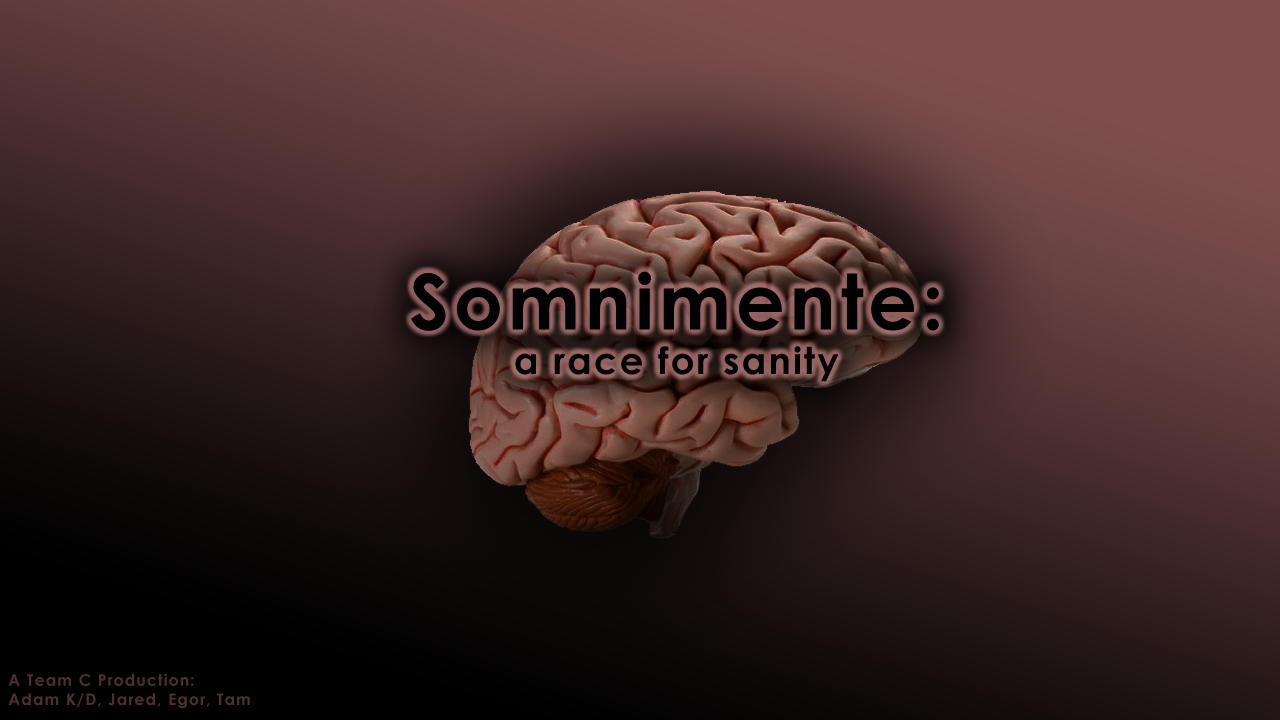
<style>
.page{position:relative;width:1280px;height:720px}
.page>*{position:absolute;margin:0}
.t1{font:37px "CenturyGothic-Bold";letter-spacing:0.06em;color:#000000}
.t2{font:77px "CenturyGothic-Bold";letter-spacing:0.06em;color:#000000}
.t3{font:16px "CenturyGothic-Bold";letter-spacing:0.06em;color:#4c2f2f}
</style>
<div class="page">
<p class="t1" style="left:411px;top:271px;width:528px;height:111px;text-align:center"><span class="t2">Somnimente:<br></span>a race for sanity</p>
<p class="t3" style="left:8px;top:673px;width:242px;height:36px">A Team C Production:<br>Adam K/D, Jared, Egor, Tam</p>
</div>
